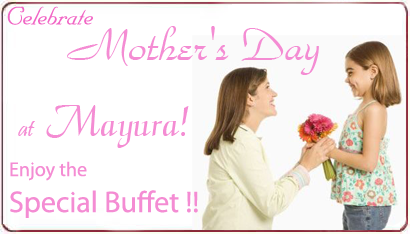
<style>
.page{position:relative;width:410px;height:234px;background:#ffffff}
.page>*{position:absolute;margin:0}
.t1{font:30px "NuptialBT-Regular";color:#f167c5}
.t2{font:48px "ParkAvenueBT-Regular";color:#f48cd3}
.t3{font:48px "ElegansScriptSSi";color:#f48cd3}
.t4{font:24px "Pristina-Regular";color:#f48cd3}
.t5{font:30px "MyriadPro-Regular";color:#f48cd3}
.t6{font:20px "MyriadPro-Regular";color:#ffa623}
.t7{font:20px "MyriadPro-Regular";color:#f48cd3}
</style>
<div class="page">
<p class="t1" style="left:7px;top:6px;width:86px;height:19px">Celebrate</p>
<p class="t2" style="left:67px;top:26px;width:252px;height:49px">Mother's Day</p>
<p class="t3" style="left:18px;top:105px;width:171px;height:43px"><span class="t4">at   </span>Mayura!</p>
<p class="t5" style="left:10px;top:161px;width:188px;height:57px;text-align:center"><span class="t6"><br></span><span class="t7">Enjoy the <br></span>Special Buffet !!</p>
</div>
